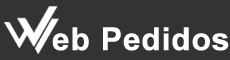
<style>
.page{position:relative;width:230px;height:60px;background:#333333}
.page>*{position:absolute;margin:0}
.t1{font:31.7px "Arial-BoldMT";color:#ffffff;font-weight:bold}
</style>
<div class="page">
<p class="t1" style="left:52px;top:27px;width:37px;height:24px">eb</p>
<p class="t1" style="left:103px;top:27px;width:126px;height:24px">Pedidos</p>
</div>
